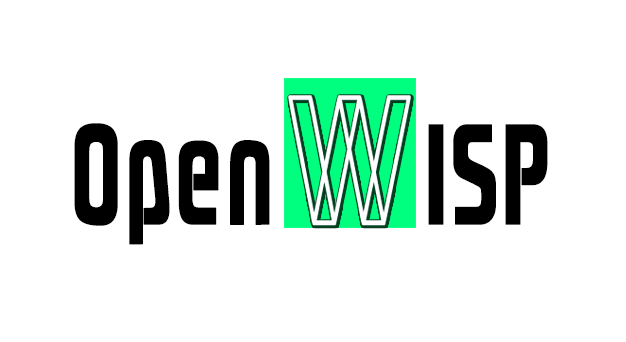
<style>
.page{position:relative;width:626px;height:342px;background:#ffffff}
.page>*{position:absolute;margin:0}
.t1{font:138px "PhrasticMedium";color:#000000;font-weight:bold;scale:0.68 1}
</style>
<div class="page">
<p class="t1" style="left:74px;top:123px;width:474px;height:122px">Open     ISP</p>
</div>
